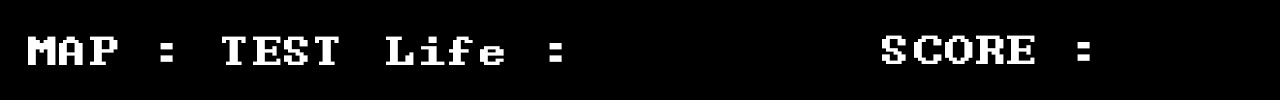
<style>
.page{position:relative;width:1280px;height:100px;background:#000000}
.page>*{position:absolute;margin:0}
.t1{font:50px "Terminal";color:#ffffff}
</style>
<div class="page">
<p class="t1" style="left:28px;top:36px;width:145px;height:29px">MAP :</p>
<p class="t1" style="left:222px;top:36px;width:117px;height:29px">TEST</p>
<p class="t1" style="left:386px;top:36px;width:176px;height:29px">Life :</p>
<p class="t1" style="left:882px;top:35px;width:208px;height:29px">SCORE :</p>
</div>
